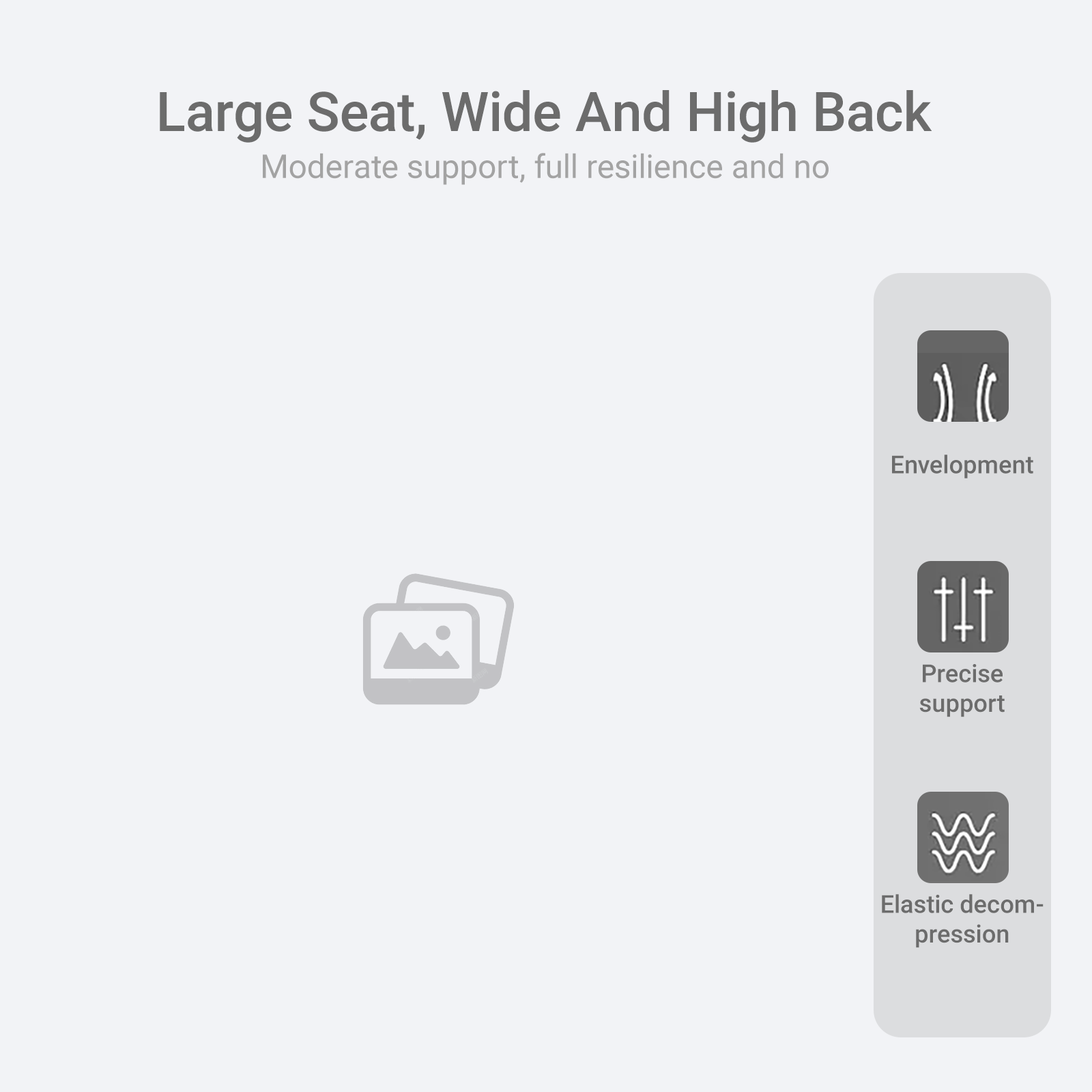
<style>
.page{position:relative;width:1092px;height:1092px;background:#f2f3f6}
.page>*{position:absolute;margin:0}
.t1{font:54.6px "Roboto-Medium";color:#6c6c6c}
.t2{font:32.8px "Roboto-Regular";color:#a3a3a3}
.t3{font:24.8px "Roboto-Medium";color:#6c6c6c}
</style>
<div class="page">
<p class="t1" style="left:160px;top:90px;width:772px;height:53px">Large Seat, Wide And High Back</p>
<p class="t2" style="left:263px;top:153px;width:566px;height:32px">Moderate support, full resilience and no</p>
<p class="t3" style="left:892px;top:455px;width:141px;height:23px">Envelopment</p>
<p class="t3" style="left:919px;top:664px;width:86px;height:53px;text-align:center">Precise<br>support</p>
<p class="t3" style="left:882px;top:894px;width:162px;height:54px;text-align:center">Elastic decom-<br>pression</p>
</div>
